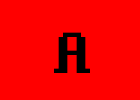
<style>
.page{position:relative;width:140px;height:100px;background:#ff0000}
.page>*{position:absolute;margin:0}
.t1{font:72px "CompassGold";color:#000000}
</style>
<div class="page">
<p class="t1" style="left:54px;top:32px;width:36px;height:41px">A</p>
</div>
